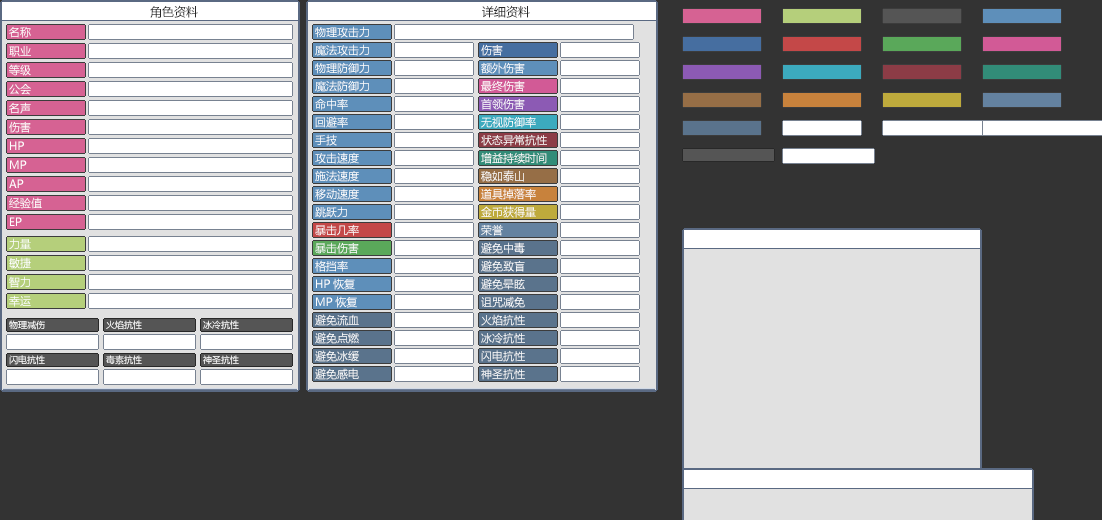
<style>
.page{position:relative;width:1102px;height:520px;background:#333333}
.page>*{position:absolute;margin:0}
.t1{font:12px "MicrosoftYaHei";color:#282828}
.t2{font:11px "MicrosoftYaHei";color:#ffffff}
.t3{font:9px "MicrosoftYaHei";color:#ffffff}
.t4{font:9px "MicrosoftYaHei"}
</style>
<div class="page">
<p class="t1" style="left:150px;top:5px;width:48px;height:13px">角色资料</p>
<p class="t1" style="left:482px;top:5px;width:48px;height:13px">详细资料</p>
<p class="t2" style="left:9px;top:26px;width:22px;height:12px">名称</p>
<p class="t2" style="left:315px;top:26px;width:54px;height:12px">物理攻击力</p>
<p class="t2" style="left:9px;top:46px;width:22px;height:11px">职业</p>
<p class="t2" style="left:315px;top:44px;width:54px;height:12px">魔法攻击力</p>
<p class="t2" style="left:481px;top:44px;width:22px;height:12px">伤害</p>
<p class="t2" style="left:9px;top:64px;width:22px;height:12px">等级</p>
<p class="t2" style="left:315px;top:62px;width:54px;height:12px">物理防御力</p>
<p class="t2" style="left:481px;top:62px;width:44px;height:12px">额外伤害</p>
<p class="t2" style="left:9px;top:84px;width:22px;height:11px">公会</p>
<p class="t2" style="left:315px;top:80px;width:54px;height:12px">魔法防御力</p>
<p class="t2" style="left:481px;top:80px;width:44px;height:12px">最终伤害</p>
<p class="t2" style="left:9px;top:102px;width:22px;height:12px">名声</p>
<p class="t2" style="left:315px;top:98px;width:33px;height:12px">命中率</p>
<p class="t2" style="left:481px;top:98px;width:44px;height:12px">首领伤害</p>
<p class="t2" style="left:9px;top:121px;width:22px;height:12px">伤害</p>
<p class="t2" style="left:315px;top:116px;width:33px;height:12px">回避率</p>
<p class="t2" style="left:481px;top:116px;width:55px;height:12px">无视防御率</p>
<p class="t2" style="left:315px;top:134px;width:22px;height:12px">手技</p>
<p class="t2" style="left:481px;top:134px;width:66px;height:12px">状态异常抗性</p>
<p class="t2" style="left:10px;top:141px;width:14px;height:9px">HP</p>
<p class="t2" style="left:10px;top:160px;width:17px;height:9px">MP</p>
<p class="t2" style="left:315px;top:152px;width:44px;height:12px">攻击速度</p>
<p class="t2" style="left:481px;top:152px;width:66px;height:12px">增益持续时间</p>
<p class="t2" style="left:315px;top:170px;width:44px;height:12px">施法速度</p>
<p class="t2" style="left:481px;top:170px;width:43px;height:12px">稳如泰山</p>
<p class="t2" style="left:9px;top:179px;width:15px;height:9px">AP</p>
<p class="t2" style="left:9px;top:197px;width:33px;height:12px">经验值</p>
<p class="t2" style="left:315px;top:188px;width:44px;height:12px">移动速度</p>
<p class="t2" style="left:481px;top:188px;width:55px;height:12px">道具掉落率</p>
<p class="t2" style="left:315px;top:206px;width:32px;height:12px">跳跃力</p>
<p class="t2" style="left:481px;top:206px;width:55px;height:12px">金币获得量</p>
<p class="t2" style="left:10px;top:217px;width:12px;height:9px">EP</p>
<p class="t2" style="left:315px;top:224px;width:44px;height:12px">暴击几率</p>
<p class="t2" style="left:481px;top:224px;width:22px;height:12px">荣誉</p>
<p class="t2" style="left:9px;top:238px;width:22px;height:12px">力量</p>
<p class="t2" style="left:315px;top:242px;width:44px;height:12px">暴击伤害</p>
<p class="t2" style="left:481px;top:242px;width:44px;height:12px">避免中毒</p>
<p class="t2" style="left:9px;top:257px;width:22px;height:12px">敏捷</p>
<p class="t2" style="left:315px;top:260px;width:33px;height:12px">格挡率</p>
<p class="t2" style="left:481px;top:260px;width:44px;height:12px">避免致盲</p>
<p class="t2" style="left:9px;top:276px;width:21px;height:12px">智力</p>
<p class="t2" style="left:316px;top:278px;width:39px;height:12px">HP恢复</p>
<p class="t2" style="left:481px;top:278px;width:44px;height:12px">避免晕眩</p>
<p class="t2" style="left:9px;top:295px;width:22px;height:12px">幸运</p>
<p class="t2" style="left:316px;top:296px;width:41px;height:12px">MP恢复</p>
<p class="t2" style="left:481px;top:296px;width:44px;height:12px">诅咒减免</p>
<p class="t2" style="left:315px;top:314px;width:44px;height:12px">避免流血</p>
<p class="t2" style="left:481px;top:314px;width:44px;height:12px">火焰抗性</p>
<p class="t3" style="left:9px;top:320px;width:36px;height:10px">物理减伤</p>
<p class="t4" style="left:106px;top:320px;width:36px;height:10px">火焰抗性</p>
<p class="t3" style="left:203px;top:320px;width:36px;height:10px">冰冷抗性</p>
<p class="t2" style="left:315px;top:332px;width:44px;height:12px">避免点燃</p>
<p class="t2" style="left:481px;top:332px;width:44px;height:12px">冰冷抗性</p>
<p class="t2" style="left:315px;top:350px;width:44px;height:12px">避免冰缓</p>
<p class="t2" style="left:481px;top:350px;width:44px;height:12px">闪电抗性</p>
<p class="t4" style="left:9px;top:355px;width:36px;height:10px">闪电抗性</p>
<p class="t4" style="left:106px;top:355px;width:36px;height:10px">毒素抗性</p>
<p class="t4" style="left:203px;top:355px;width:36px;height:10px">神圣抗性</p>
<p class="t2" style="left:315px;top:368px;width:44px;height:12px">避免感电</p>
<p class="t2" style="left:481px;top:368px;width:44px;height:12px">神圣抗性</p>
</div>
